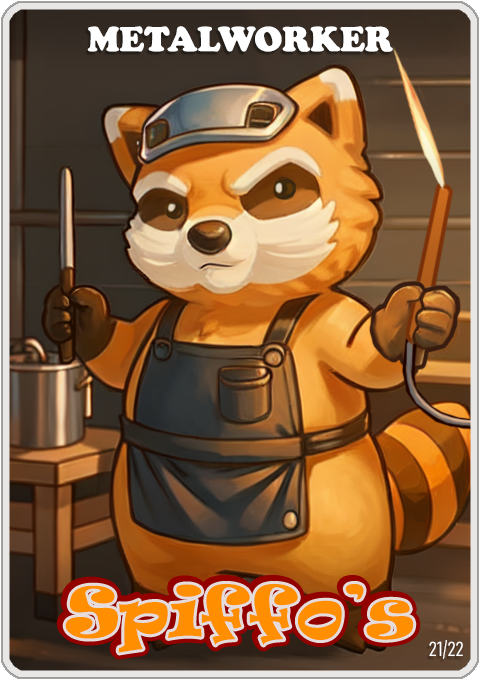
<style>
.page{position:relative;width:480px;height:680px}
.page>*{position:absolute;margin:0}
.t1{font:36px "CooperBlack";color:#ffffff}
.t2{font:65px "Ravie";color:#ff8e00}
.t3{font:20px "Bahnschrift-LightCondensed";color:#ffffff}
</style>
<div class="page">
<p class="t1" style="left:87px;top:26px;width:306px;height:26px">METALWORKER</p>
<p class="t2" style="left:65px;top:584px;width:349px;height:69px">Spiffo’s</p>
<p class="t3" style="left:429px;top:640px;width:34px;height:19px">21/22</p>
</div>
